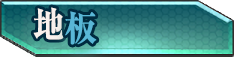
<style>
.page{position:relative;width:234px;height:57px}
.page>*{position:absolute;margin:0}
.t1{font:36px "RyuminPr6N-ExBold";letter-spacing:-0.04em;color:#f9f1ed;font-weight:bold;scale:0.9 1}
.t2{font:36px "RyuminPr6N-ExBold";letter-spacing:-0.04em;color:#59b7d7;font-weight:bold;scale:0.9 1}
</style>
<div class="page">
<p class="t1" style="left:33px;top:7px;width:31px;height:33px">地</p>
<p class="t2" style="left:65px;top:11px;width:32px;height:34px">板</p>
</div>
